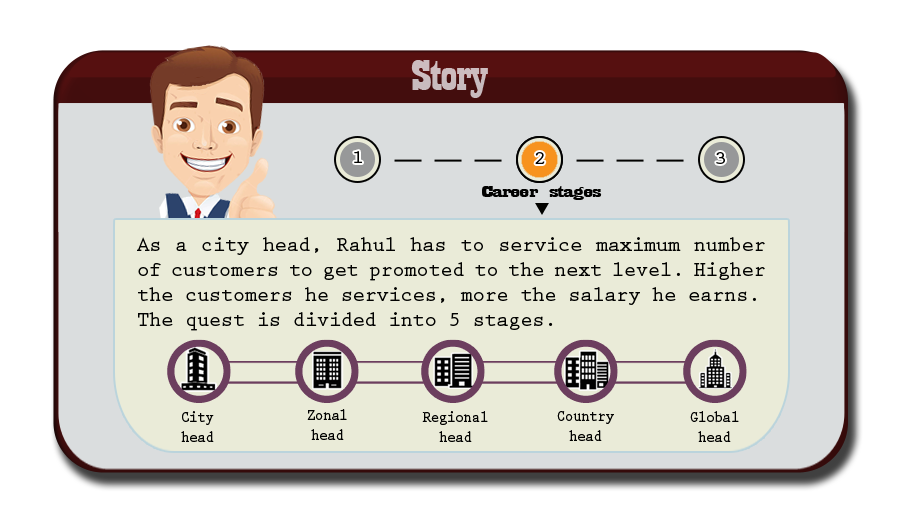
<style>
.page{position:relative;width:910px;height:512px;background:#eaebd8}
.page>*{position:absolute;margin:0}
.t1{font:44.6px "Playbill";letter-spacing:-0.025em;color:#cabbbe;scale:1.61 1}
.t2{font:18.8px "PrestigeEliteStd-Bd";letter-spacing:-0.025em;color:#020201;scale:1.18 1}
.t3{font:17.3px "Playbill";letter-spacing:-0.025em;color:#020201;scale:2.47 1}
.t4{font:20.8px "PrestigeEliteStd-Bd";letter-spacing:-0.025em;color:#020201}
.t5{font:16.7px "PrestigeEliteStd-Bd";letter-spacing:-0.025em;color:#020201;scale:0.85 1}
</style>
<div class="page">
<p class="t1" style="left:411px;top:60px;width:77px;height:38px">Story</p>
<p class="t2" style="left:354px;top:151px;width:8px;height:12px">1</p>
<p class="t2" style="left:535px;top:152px;width:10px;height:12px">2</p>
<p class="t2" style="left:716px;top:152px;width:9px;height:12px">3</p>
<p class="t3" style="left:482px;top:186px;width:120px;height:14px">Career stages</p>
<p class="t4" style="left:137px;top:237px;width:628px;height:94px;text-align:justify">As a city head, Rahul has to service maximum number of customers to get promoted to the next level. Higher the customers he services, more the salary he earns.<br>The quest is divided into 5 stages.</p>
<p class="t5" style="left:181px;top:411px;width:33px;height:31px;text-align:center">City<br>head</p>
<p class="t5" style="left:307px;top:409px;width:40px;height:31px;text-align:center">Zonal<br>head</p>
<p class="t5" style="left:422px;top:411px;width:66px;height:31px;text-align:center">Regional<br>head</p>
<p class="t5" style="left:557px;top:411px;width:57px;height:30px;text-align:center">Country<br>head</p>
<p class="t5" style="left:690px;top:411px;width:49px;height:31px;text-align:center">Global<br>head</p>
</div>
